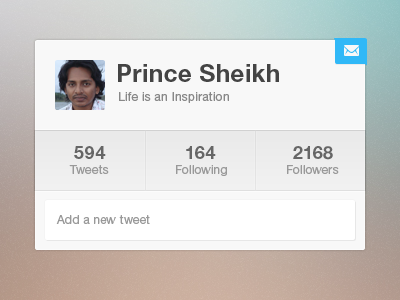
<style>
.page{position:relative;width:400px;height:300px;background:#f8f8f8}
.page>*{position:absolute;margin:0}
.t1{font:24px "HelveticaNeue-Bold";letter-spacing:0.02em;color:#444444}
.t2{font:12px "HelveticaNeue-Roman";letter-spacing:0.02em;color:#888888}
.t3{font:18px "HelveticaNeue-Bold";letter-spacing:0.02em;color:#666666}
.t4{font:12px "HelveticaNeue-Roman";letter-spacing:0.02em;color:#999999}
</style>
<div class="page">
<p class="t1" style="left:118px;top:64px;width:161px;height:18px">Prince Sheikh</p>
<p class="t2" style="left:119px;top:92px;width:110px;height:11px">Life is an Inspiration</p>
<p class="t3" style="left:74px;top:146px;width:32px;height:13px">594</p>
<p class="t3" style="left:186px;top:146px;width:30px;height:13px">164</p>
<p class="t3" style="left:293px;top:146px;width:40px;height:14px">2168</p>
<p class="t4" style="left:69px;top:165px;width:40px;height:9px">Tweets</p>
<p class="t4" style="left:176px;top:165px;width:51px;height:11px">Following</p>
<p class="t4" style="left:287px;top:165px;width:52px;height:9px">Followers</p>
<p class="t4" style="left:56px;top:215px;width:94px;height:9px">Add a new tweet</p>
</div>
